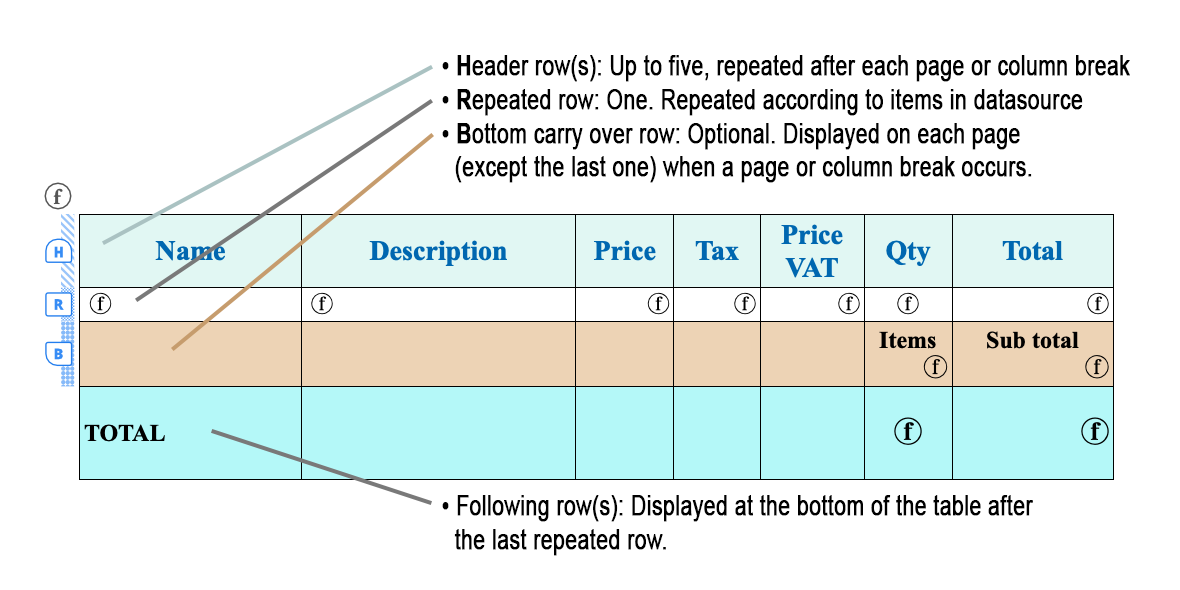
<style>
.page{position:relative;width:1180px;height:590px;background:#ffffff}
.page>*{position:absolute;margin:0}
.t1{font:28px "ArialMT";color:#000000;font-weight:bold;scale:0.75 1}
.t2{font:28px "Arial-BoldMT";color:#000000;font-weight:bold;scale:0.75 1}
</style>
<div class="page">
<p class="t1" style="left:442px;top:55px;width:688px;height:128px">• <span class="t2">H</span>eader row(s): Up to five, repeated after each page or column break<br>• <span class="t2">R</span>epeated row: One. Repeated according to items in datasource<br>• <span class="t2">B</span>ottom carry over row: Optional. Displayed on each page<br>  (except the last one) when a page or column break occurs.</p>
<p class="t1" style="left:442px;top:495px;width:591px;height:61px">• Following row(s): Displayed at the bottom of the table after<br>  the last repeated row.</p>
</div>
